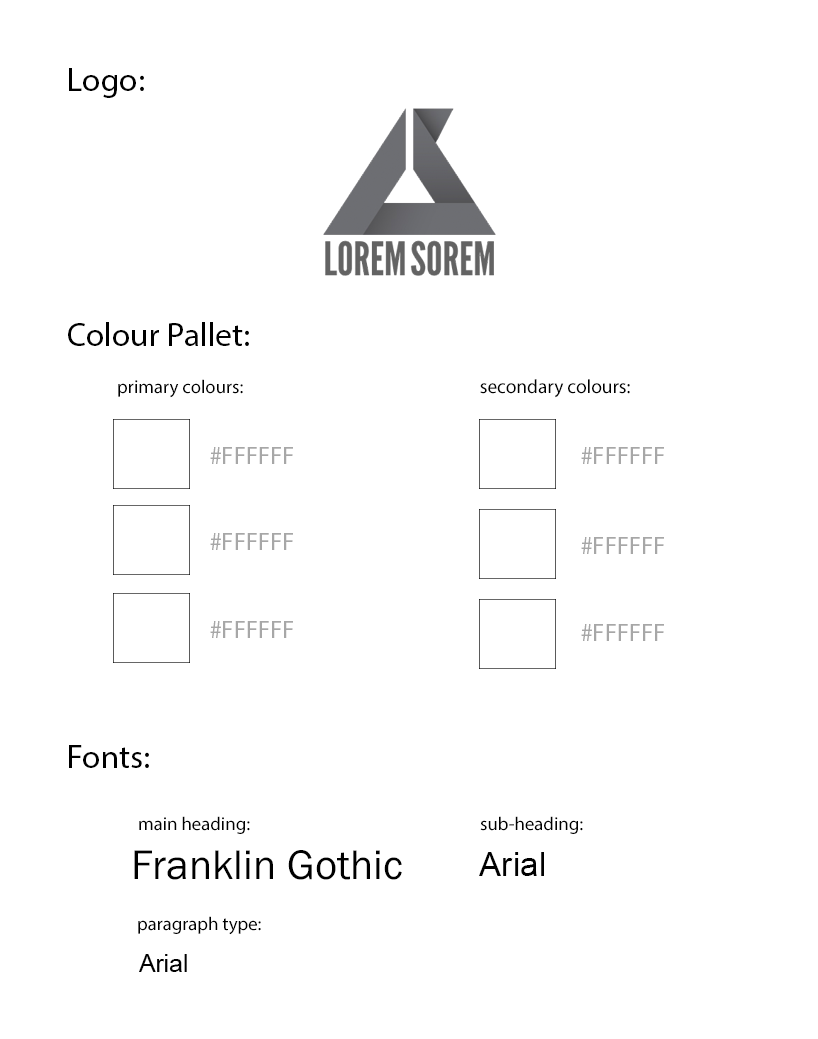
<style>
.page{position:relative;width:818px;height:1039px;background:#ffffff}
.page>*{position:absolute;margin:0}
.t1{font:33.3px "MyriadPro-Regular";color:#000000}
.t2{font:18.7px "MyriadPro-Regular";color:#000000}
.t3{font:19.4px "MyriadPro-Regular";color:#000000}
.t4{font:25px "MyriadPro-Regular";color:#a7a7a7}
.t5{font:42.9px "FranklinGothic-Book";color:#000000}
.t6{font:33.3px "ArialMT";color:#000000}
.t7{font:25px "ArialMT";color:#000000}
</style>
<div class="page">
<p class="t1" style="left:69px;top:68px;width:75px;height:30px">Logo:</p>
<p class="t1" style="left:68px;top:322px;width:181px;height:24px">Colour Pallet:</p>
<p class="t2" style="left:118px;top:379px;width:125px;height:19px">primary colours:</p>
<p class="t3" style="left:480px;top:379px;width:150px;height:19px">secondary colours:</p>
<p class="t4" style="left:210px;top:447px;width:83px;height:17px">#FFFFFF</p>
<p class="t4" style="left:581px;top:447px;width:83px;height:17px">#FFFFFF</p>
<p class="t4" style="left:210px;top:533px;width:83px;height:17px">#FFFFFF</p>
<p class="t4" style="left:581px;top:537px;width:83px;height:17px">#FFFFFF</p>
<p class="t4" style="left:210px;top:621px;width:83px;height:17px">#FFFFFF</p>
<p class="t4" style="left:581px;top:624px;width:83px;height:17px">#FFFFFF</p>
<p class="t1" style="left:69px;top:745px;width:80px;height:23px">Fonts:</p>
<p class="t2" style="left:139px;top:816px;width:111px;height:18px">main heading:</p>
<p class="t2" style="left:480px;top:816px;width:103px;height:18px">sub-heading:</p>
<p class="t5" style="left:134px;top:850px;width:268px;height:30px">Franklin Gothic</p>
<p class="t6" style="left:479px;top:852px;width:65px;height:24px">Arial</p>
<p class="t2" style="left:138px;top:916px;width:123px;height:19px">paragraph type:</p>
<p class="t7" style="left:139px;top:954px;width:48px;height:18px">Arial</p>
</div>
